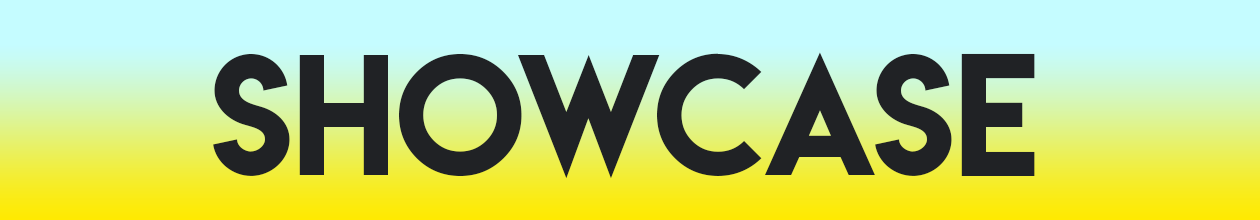
<style>
.page{position:relative;width:1260px;height:220px;background:#c5fcff}
.page>*{position:absolute;margin:0}
.t1{font:153px "LemonMilk";color:#202225}
</style>
<div class="page">
<p class="t1" style="left:213px;top:52px;width:822px;height:127px">SHOWCASE</p>
</div>
